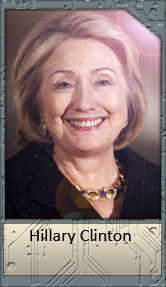
<style>
.page{position:relative;width:166px;height:287px}
.page>*{position:absolute;margin:0}
.t1{font:18px "Calibri";color:#000000}
</style>
<div class="page">
<p class="t1" style="left:30px;top:229px;width:101px;height:15px">Hillary Clinton</p>
</div>
